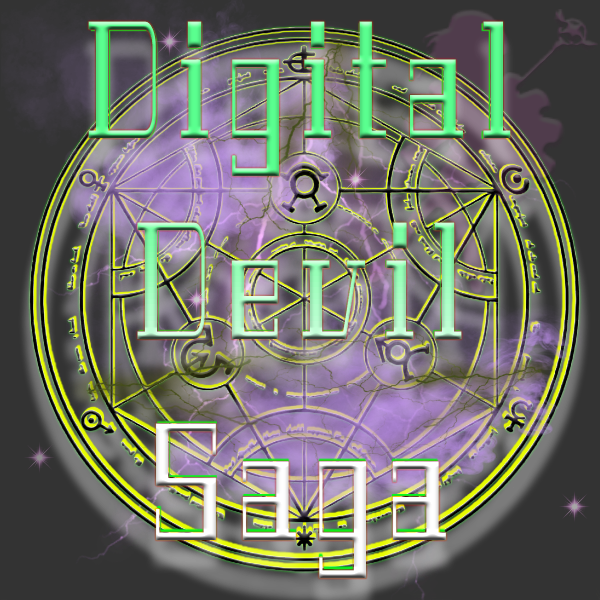
<style>
.page{position:relative;width:600px;height:600px}
.page>*{position:absolute;margin:0}
.t1{font:167.5px "GeostarFill-Regular";scale:0.44 1}
</style>
<div class="page">
<p class="t1" style="left:88px;top:21px;width:423px;height:557px;text-align:center">D i g i t a l<br>D e v i l<br>S a g a</p>
</div>
